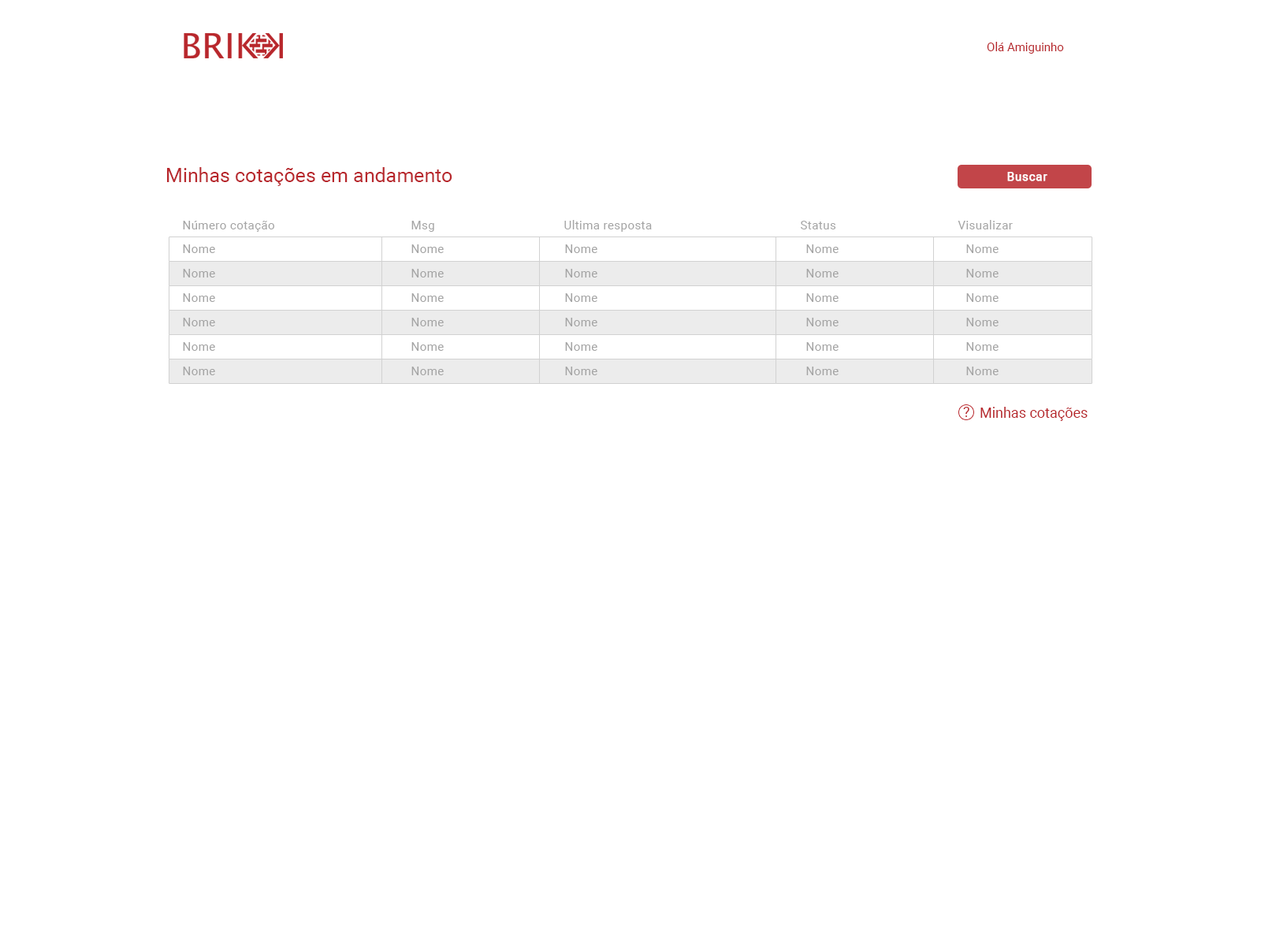
<style>
.page{position:relative;width:1261px;height:946px;background:#ffffff}
.page>*{position:absolute;margin:0}
.t1{font:11.8px "Roboto-Regular";color:#b8272c}
.t2{font:19.7px "Roboto-Regular";color:#b8272c}
.t3{font:11.8px "Roboto-Regular";letter-spacing:0.03em;color:#ffffff;font-weight:bold}
.t4{font:11.8px "Roboto-Regular";letter-spacing:0.03em;color:#a4a4a4}
.t5{font:14.2px "Roboto-Regular";color:#b8272c}
</style>
<div class="page">
<p class="t1" style="left:987px;top:42px;width:77px;height:12px">Olá Amiguinho</p>
<p class="t2" style="left:167px;top:167px;width:285px;height:19px">Minhas cotações em andamento</p>
<p class="t3" style="left:1007px;top:172px;width:40px;height:9px">Buscar</p>
<p class="t4" style="left:183px;top:221px;width:91px;height:11px">Número cotação</p>
<p class="t4" style="left:411px;top:221px;width:23px;height:11px">Msg</p>
<p class="t4" style="left:564px;top:220px;width:88px;height:12px">Ultima resposta</p>
<p class="t4" style="left:801px;top:221px;width:35px;height:8px">Status</p>
<p class="t4" style="left:958px;top:220px;width:55px;height:9px">Visualizar</p>
<p class="t4" style="left:183px;top:244px;width:32px;height:9px">Nome</p>
<p class="t4" style="left:411px;top:244px;width:33px;height:9px">Nome</p>
<p class="t4" style="left:565px;top:244px;width:32px;height:9px">Nome</p>
<p class="t4" style="left:806px;top:244px;width:33px;height:9px">Nome</p>
<p class="t4" style="left:966px;top:244px;width:32px;height:9px">Nome</p>
<p class="t4" style="left:183px;top:269px;width:32px;height:8px">Nome</p>
<p class="t4" style="left:411px;top:269px;width:33px;height:8px">Nome</p>
<p class="t4" style="left:565px;top:269px;width:32px;height:8px">Nome</p>
<p class="t4" style="left:806px;top:269px;width:33px;height:8px">Nome</p>
<p class="t4" style="left:966px;top:269px;width:32px;height:8px">Nome</p>
<p class="t4" style="left:183px;top:293px;width:32px;height:9px">Nome</p>
<p class="t4" style="left:411px;top:293px;width:33px;height:9px">Nome</p>
<p class="t4" style="left:565px;top:293px;width:32px;height:9px">Nome</p>
<p class="t4" style="left:806px;top:293px;width:33px;height:9px">Nome</p>
<p class="t4" style="left:966px;top:293px;width:32px;height:9px">Nome</p>
<p class="t4" style="left:183px;top:318px;width:32px;height:8px">Nome</p>
<p class="t4" style="left:411px;top:318px;width:33px;height:8px">Nome</p>
<p class="t4" style="left:565px;top:318px;width:32px;height:8px">Nome</p>
<p class="t4" style="left:806px;top:318px;width:33px;height:8px">Nome</p>
<p class="t4" style="left:966px;top:318px;width:32px;height:8px">Nome</p>
<p class="t4" style="left:183px;top:342px;width:32px;height:9px">Nome</p>
<p class="t4" style="left:411px;top:342px;width:33px;height:9px">Nome</p>
<p class="t4" style="left:565px;top:342px;width:32px;height:9px">Nome</p>
<p class="t4" style="left:806px;top:342px;width:33px;height:9px">Nome</p>
<p class="t4" style="left:966px;top:342px;width:32px;height:9px">Nome</p>
<p class="t4" style="left:183px;top:366px;width:32px;height:9px">Nome</p>
<p class="t4" style="left:411px;top:366px;width:33px;height:9px">Nome</p>
<p class="t4" style="left:565px;top:366px;width:32px;height:9px">Nome</p>
<p class="t4" style="left:806px;top:366px;width:33px;height:9px">Nome</p>
<p class="t4" style="left:966px;top:366px;width:32px;height:9px">Nome</p>
<p class="t5" style="left:963px;top:407px;width:6px;height:10px">?</p>
<p class="t5" style="left:980px;top:407px;width:108px;height:14px">Minhas cotações</p>
</div>
